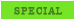
<style>
.page{position:relative;width:75px;height:20px;background:#76e527}
.page>*{position:absolute;margin:0}
.t1{font:9px "Century";letter-spacing:0.1em;color:#477c21;font-weight:bold}
</style>
<div class="page">
<p class="t1" style="left:14px;top:7px;width:48px;height:8px">SPECIAL</p>
</div>
